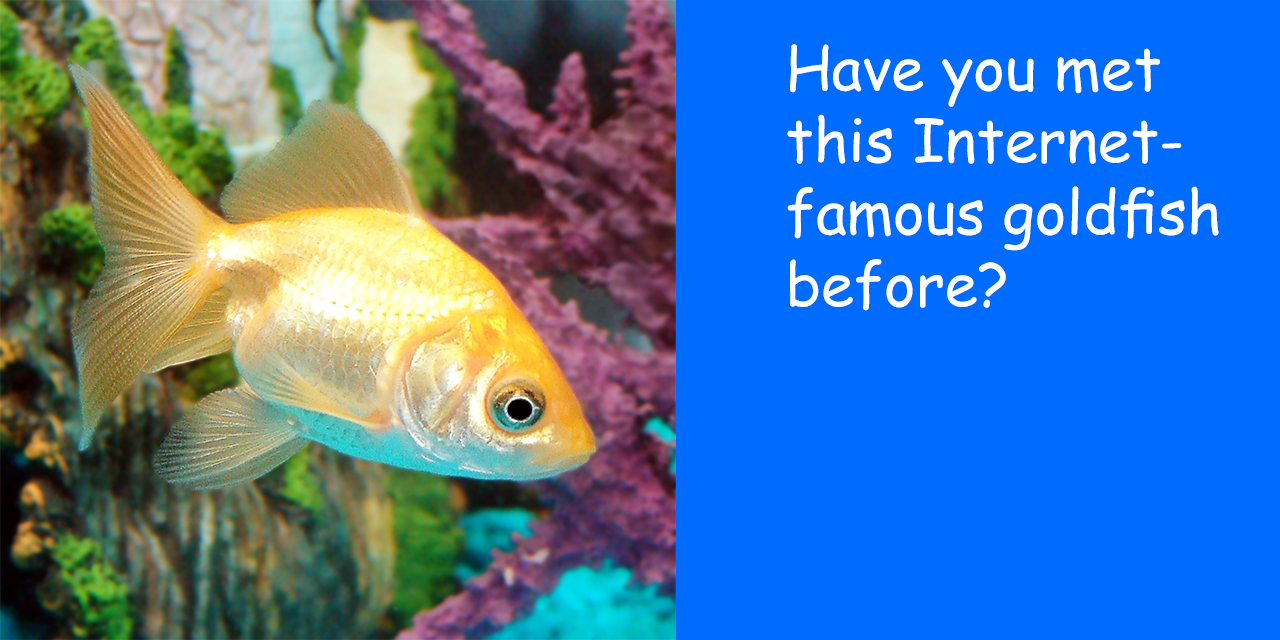
<style>
.page{position:relative;width:1280px;height:640px;background:#006cff}
.page>*{position:absolute;margin:0}
.t1{font:60px "ComicSansMS";color:#ffffff}
</style>
<div class="page">
<p class="t1" style="left:787px;top:44px;width:432px;height:267px">Have you met<br>this Internet-<br>famous goldfish<br>before?</p>
</div>
